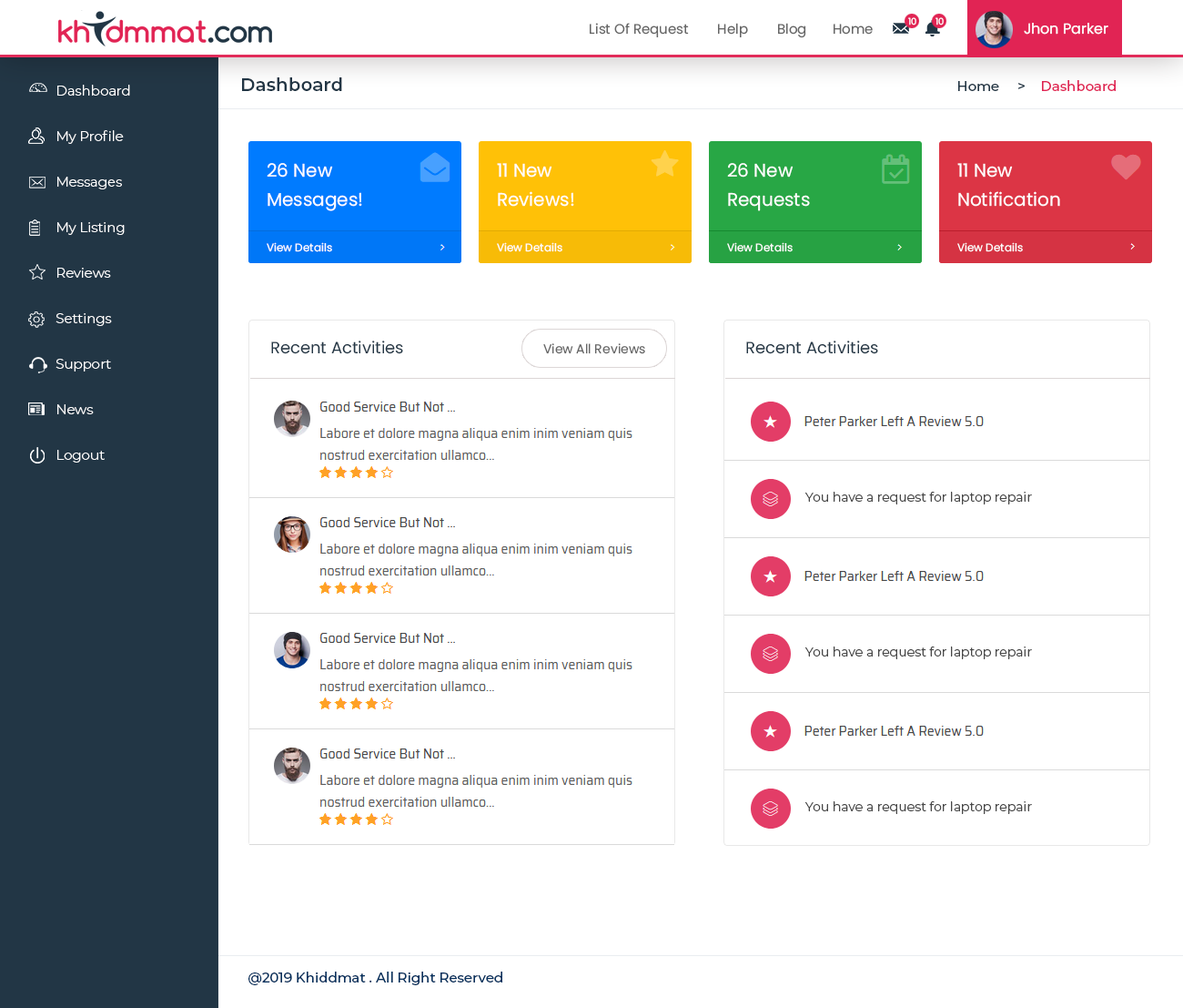
<style>
.page{position:relative;width:1183px;height:1008px;background:#ffffff}
.page>*{position:absolute;margin:0}
.t1{font:9.1px "Poppins-Regular";color:#ffffff}
.t2{font:13.7px "Poppins-Regular";color:#666666}
.t3{font:12.7px "Poppins-Regular";color:#666666}
.t4{font:14.6px "Poppins-Regular";color:#ffffff}
.t5{font:18.2px "Montserrat-SemiBold";color:#223645}
.t6{font:13.7px/45.5px "Montserrat-Light";color:#ffffff}
.t7{font:13.7px "Montserrat-Medium";color:#223645}
.t8{font:13.7px "Montserrat-Medium";color:#05315e}
.t9{font:13.7px "Montserrat-Medium";color:#e12454}
.t10{font:18.2px/29.1px "Poppins-Regular";color:#ffffff}
.t11{font:10.9px "Poppins-Regular";color:#ffffff}
.t12{font:16.4px "Poppins-Regular";color:#223645}
.t13{font:12.7px "Montserrat-Regular";color:#484848}
</style>
<div class="page">
<p class="t1" style="left:908px;top:17px;width:9px;height:8px">10</p>
<p class="t1" style="left:936px;top:17px;width:8px;height:8px">10</p>
<p class="t2" style="left:590px;top:23px;width:519px;height:15px"><span class="t3">       </span>  List Of Request        Help        Blog       Home                                          <span class="t4">Jhon Parker</span></p>
<p class="t5" style="left:242px;top:77px;width:100px;height:14px">Dashboard</p>
<p class="t6" style="left:56px;top:85px;width:74px;height:377px">Dashboard<br>My Profile<br>Messages<br>My Listing<br>Reviews<br>Settings<br>Support<br>News<br>Logout</p>
<p class="t7" style="left:959px;top:80px;width:157px;height:11px"><span class="t8">    </span>Home     &gt;    <span class="t9">Dashboard</span></p>
<p class="t10" style="left:267px;top:163px;width:95px;height:48px">26 New <br>Messages!</p>
<p class="t10" style="left:497px;top:163px;width:77px;height:44px">11 New <br>Reviews!</p>
<p class="t10" style="left:727px;top:163px;width:83px;height:48px">26 New <br>Requests</p>
<p class="t10" style="left:958px;top:163px;width:102px;height:44px">11 New <br>Notification</p>
<p class="t11" style="left:267px;top:242px;width:65px;height:10px">View Details</p>
<p class="t11" style="left:497px;top:242px;width:66px;height:10px">View Details</p>
<p class="t11" style="left:727px;top:242px;width:66px;height:10px">View Details</p>
<p class="t11" style="left:958px;top:242px;width:65px;height:10px">View Details</p>
<p class="t12" style="left:271px;top:340px;width:132px;height:14px">Recent Activities</p>
<p class="t12" style="left:746px;top:340px;width:132px;height:14px">Recent Activities</p>
<p class="t3" style="left:543px;top:343px;width:102px;height:11px">View All Reviews</p>
<p class="t13" style="left:806px;top:492px;width:226px;height:12px">You have a request for laptop repair</p>
<p class="t13" style="left:806px;top:646px;width:226px;height:13px">You have a request for laptop repair</p>
<p class="t13" style="left:806px;top:801px;width:226px;height:13px">You have a request for laptop repair</p>
<p class="t8" style="left:249px;top:971px;width:253px;height:14px">@2019 Khiddmat . All Right Reserved</p>
</div>
